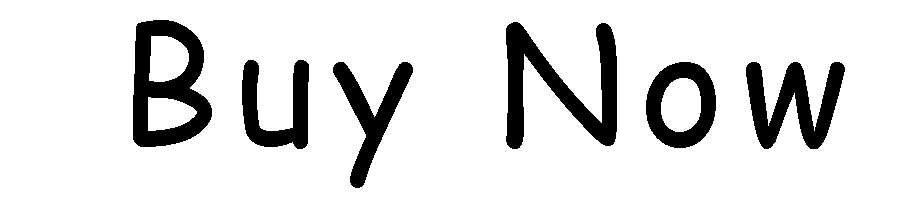
<style>
.page{position:relative;width:900px;height:200px;background:#ffffff}
.page>*{position:absolute;margin:0}
.t1{font:160px "ComicSansMS";letter-spacing:0.1em;color:#000000}
</style>
<div class="page">
<p class="t1" style="left:133px;top:20px;width:712px;height:168px">Buy Now</p>
</div>
